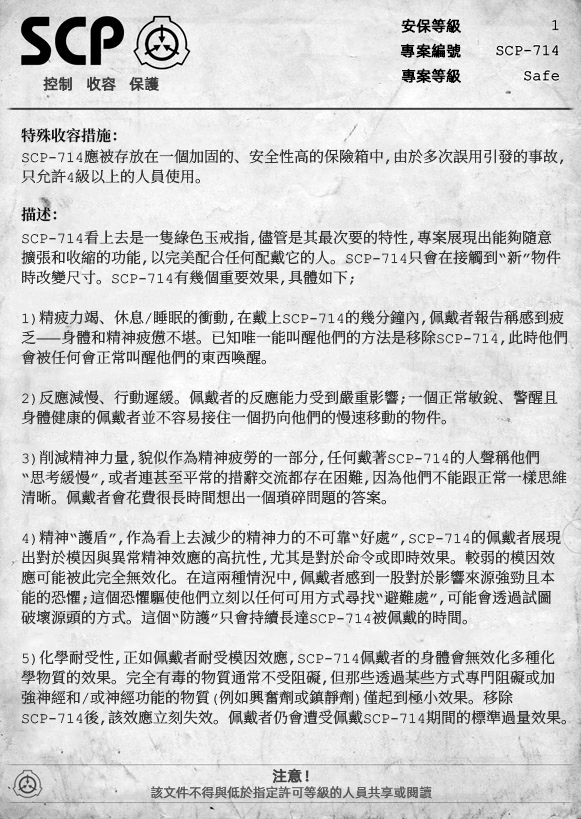
<style>
.page{position:relative;width:581px;height:819px}
.page>*{position:absolute;margin:0}
.t1{font:15px "AlibabaPuHuiTiR";color:#000000;font-weight:bold}
.t2{font:15px "AlibabaPuHuiTiR";color:#3d3d3d;font-weight:bold}
.t3{font:15px "ContainmentBreach-Bold";color:#121212}
.t4{font:15px/20px "ContainmentBreach-Regular";color:#353535}
.t5{font:15px "AlibabaPuHuiTiR";color:#414141;font-weight:bold}
.t6{font:13px "AlibabaPuHuiTiR";color:#575757}
</style>
<div class="page">
<p class="t1" style="left:401px;top:18px;width:60px;height:15px">安保等級</p>
<p class="t1" style="left:400px;top:43px;width:61px;height:15px">專案編號</p>
<p class="t2" style="left:43px;top:76px;width:116px;height:15px">控制   收容   保護</p>
<p class="t1" style="left:401px;top:68px;width:60px;height:15px">專案等級</p>
<p class="t3" style="left:21px;top:128px;width:96px;height:15px">特殊收容措施：</p>
<p class="t4" style="left:21px;top:149px;width:543px;height:35px">SCP-714應被存放在一個加固的、安全性高的保險箱中，由於多次誤用引發的事故，<br>只允許4級以上的人員使用。</p>
<p class="t3" style="left:21px;top:207px;width:36px;height:15px">描述：</p>
<p class="t4" style="left:21px;top:230px;width:547px;height:496px">SCP-714看上去是一隻綠色玉戒指，儘管是其最次要的特性，專案展現出能夠隨意<br>擴張和收縮的功能，以完美配合任何配戴它的人。SCP-714只會在接觸到“新”物件<br>時改變尺寸。SCP-714有幾個重要效果，具體如下；<br><br>1）精疲力竭、休息/睡眠的衝動,在戴上SCP-714的幾分鐘內，佩戴者報告稱感到疲<br>乏——身體和精神疲憊不堪。已知唯一能叫醒他們的方法是移除SCP-714，此時他們<br>會被任何會正常叫醒他們的東西喚醒。<br><br>2）反應減慢、行動遲緩。佩戴者的反應能力受到嚴重影響；一個正常敏銳、警醒且<br>身體健康的佩戴者並不容易接住一個扔向他們的慢速移動的物件。<br><br>3）削減精神力量，貌似作為精神疲勞的一部分，任何戴著SCP-714的人聲稱他們<br>“思考緩慢”，或者連甚至平常的措辭交流都存在困難，因為他們不能跟正常一樣思維<br>清晰。佩戴者會花費很長時間想出一個瑣碎問題的答案。<br><br>4）精神“護盾”，作為看上去減少的精神力的不可靠“好處”，SCP-714的佩戴者展現<br>出對於模因與異常精神效應的高抗性，尤其是對於命令或即時效果。較弱的模因效<br>應可能被此完全無效化。在這兩種情況中，佩戴者感到一股對於影響來源強勁且本<br>能的恐懼；這個恐懼驅使他們立刻以任何可用方式尋找“避難處”，可能會透過試圖<br>破壞源頭的方式。這個“防護”只會持續長達SCP-714被佩戴的時間。<br><br>5）化學耐受性，正如佩戴者耐受模因效應，SCP-714佩戴者的身體會無效化多種化<br>學物質的效果。完全有毒的物質通常不受阻礙，但那些透過某些方式專門阻礙或加<br>強神經和/或神經功能的物質（例如興奮劑或鎮靜劑）僅起到極小效果。移除<br>SCP-714後，該效應立刻失效。佩戴者仍會遭受佩戴SCP-714期間的標準過量效果。</p>
<p class="t5" style="left:272px;top:768px;width:37px;height:15px">注意！</p>
<p class="t6" style="left:151px;top:786px;width:281px;height:13px">該文件不得與低於指定許可等級的人員共享或閱讀</p>
</div>
